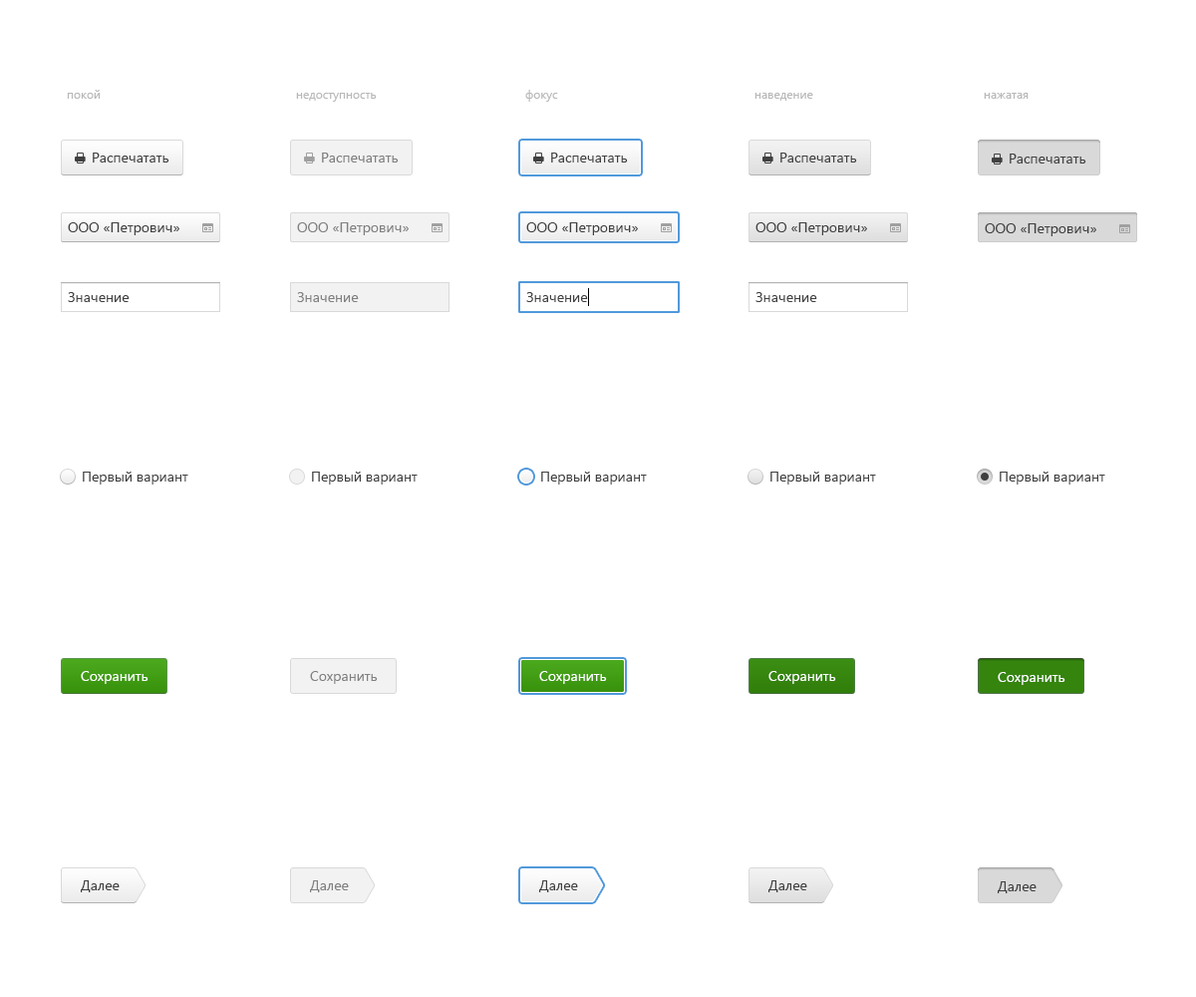
<style>
.page{position:relative;width:1196px;height:997px;background:#ffffff}
.page>*{position:absolute;margin:0}
.t1{font:12px "SegoeUI";color:#b8b8b8}
.t2{font:14px "SegoeUI";color:#404040}
.t3{font:14px "SegoeUI";color:#808080}
.t4{font:14px "SegoeUI";color:#ffffff}
</style>
<div class="page">
<p class="t1" style="left:67px;top:90px;width:34px;height:9px">покой</p>
<p class="t1" style="left:525px;top:90px;width:33px;height:12px">фокус</p>
<p class="t1" style="left:296px;top:93px;width:81px;height:9px">недоступность</p>
<p class="t1" style="left:755px;top:93px;width:58px;height:8px">наведение</p>
<p class="t1" style="left:984px;top:93px;width:45px;height:6px">нажатая</p>
<p class="t2" style="left:93px;top:153px;width:76px;height:9px">Распечатать</p>
<p class="t3" style="left:322px;top:153px;width:77px;height:9px">Распечатать</p>
<p class="t2" style="left:551px;top:153px;width:77px;height:9px">Распечатать</p>
<p class="t2" style="left:781px;top:153px;width:76px;height:9px">Распечатать</p>
<p class="t2" style="left:1010px;top:154px;width:77px;height:9px">Распечатать</p>
<p class="t2" style="left:68px;top:222px;width:111px;height:13px">ООО «Петрович»</p>
<p class="t3" style="left:297px;top:222px;width:112px;height:13px">ООО «Петрович»</p>
<p class="t2" style="left:526px;top:222px;width:112px;height:13px">ООО «Петрович»</p>
<p class="t2" style="left:756px;top:222px;width:111px;height:13px">ООО «Петрович»</p>
<p class="t2" style="left:985px;top:223px;width:112px;height:13px">ООО «Петрович»</p>
<p class="t2" style="left:68px;top:292px;width:62px;height:10px">Значение</p>
<p class="t3" style="left:297px;top:292px;width:62px;height:10px">Значение</p>
<p class="t2" style="left:526px;top:292px;width:62px;height:10px">Значение</p>
<p class="t2" style="left:756px;top:292px;width:61px;height:10px">Значение</p>
<p class="t2" style="left:83px;top:472px;width:105px;height:12px">Первый вариант</p>
<p class="t2" style="left:312px;top:472px;width:106px;height:12px">Первый вариант</p>
<p class="t2" style="left:541px;top:472px;width:106px;height:12px">Первый вариант</p>
<p class="t2" style="left:771px;top:472px;width:105px;height:12px">Первый вариант</p>
<p class="t2" style="left:1000px;top:472px;width:105px;height:12px">Первый вариант</p>
<p class="t4" style="left:81px;top:671px;width:68px;height:13px">Сохранить</p>
<p class="t3" style="left:310px;top:671px;width:68px;height:13px">Сохранить</p>
<p class="t4" style="left:539px;top:671px;width:68px;height:13px">Сохранить</p>
<p class="t4" style="left:769px;top:671px;width:67px;height:13px">Сохранить</p>
<p class="t4" style="left:998px;top:672px;width:68px;height:13px">Сохранить</p>
<p class="t2" style="left:81px;top:880px;width:39px;height:12px">Далее</p>
<p class="t3" style="left:310px;top:880px;width:39px;height:12px">Далее</p>
<p class="t2" style="left:539px;top:880px;width:39px;height:12px">Далее</p>
<p class="t2" style="left:769px;top:880px;width:38px;height:12px">Далее</p>
<p class="t2" style="left:998px;top:881px;width:39px;height:12px">Далее</p>
</div>
